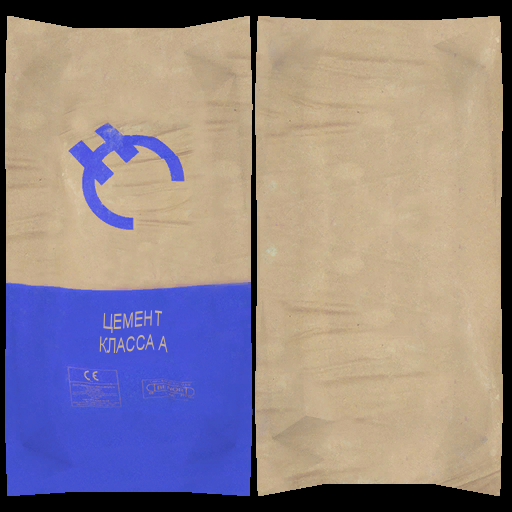
<style>
.page{position:relative;width:512px;height:512px}
.page>*{position:absolute;margin:0}
.t1{font:21.1px/24px "ArialMT";color:#c8b190;scale:0.66 1}
</style>
<div class="page">
<p class="t1" style="left:99px;top:310px;width:69px;height:43px;text-align:center;rotate:2deg">ЦЕМЕНТ<br> КЛАССА А</p>
</div>
